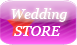
<style>
.page{position:relative;width:77px;height:45px}
.page>*{position:absolute;margin:0}
.t1{font:14px "Georgia-Italic";color:#ffffff}
</style>
<div class="page">
<p class="t1" style="left:11px;top:8px;width:56px;height:14px">Wedding</p>
<p class="t1" style="left:14px;top:26px;width:47px;height:10px">STORE</p>
</div>
